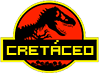
<style>
.page{position:relative;width:100px;height:74px;background:#ffffff}
.page>*{position:absolute;margin:0}
.t1{font:14.7px "Hooge0553";color:#fff500}
</style>
<div class="page">
<p class="t1" style="left:6px;top:40px;width:88px;height:15px">cretáceo</p>
</div>
